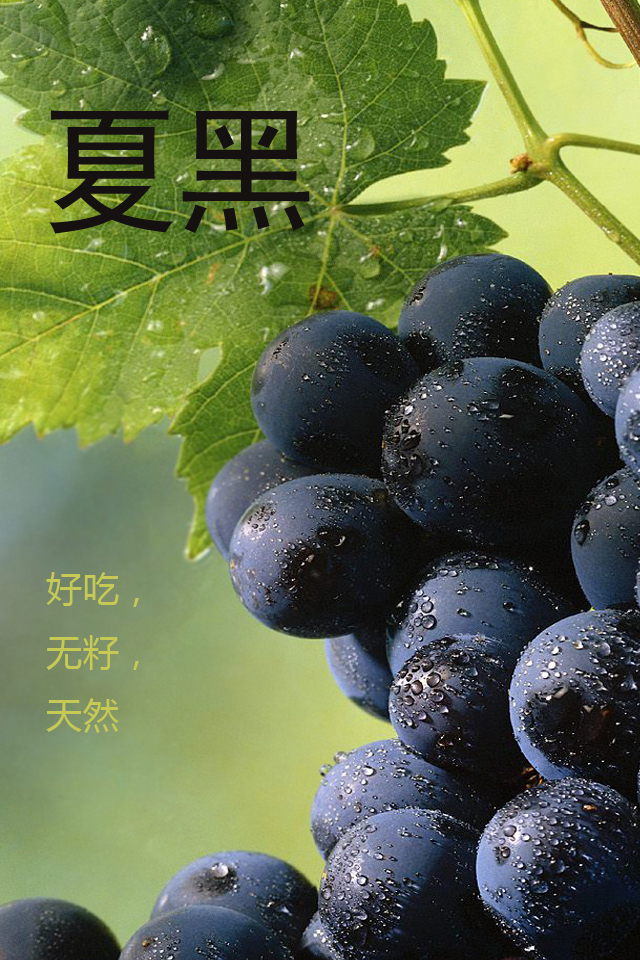
<style>
.page{position:relative;width:640px;height:960px}
.page>*{position:absolute;margin:0}
.t1{font:135.8px "SimHei";color:#151110}
.t2{font:36.2px "MicrosoftYaHei";color:#c6ca55}
</style>
<div class="page">
<p class="t1" style="left:49px;top:110px;width:261px;height:124px">夏黑</p>
<p class="t2" style="left:46px;top:572px;width:93px;height:161px">好吃，<br>无籽，<br>天然</p>
</div>
